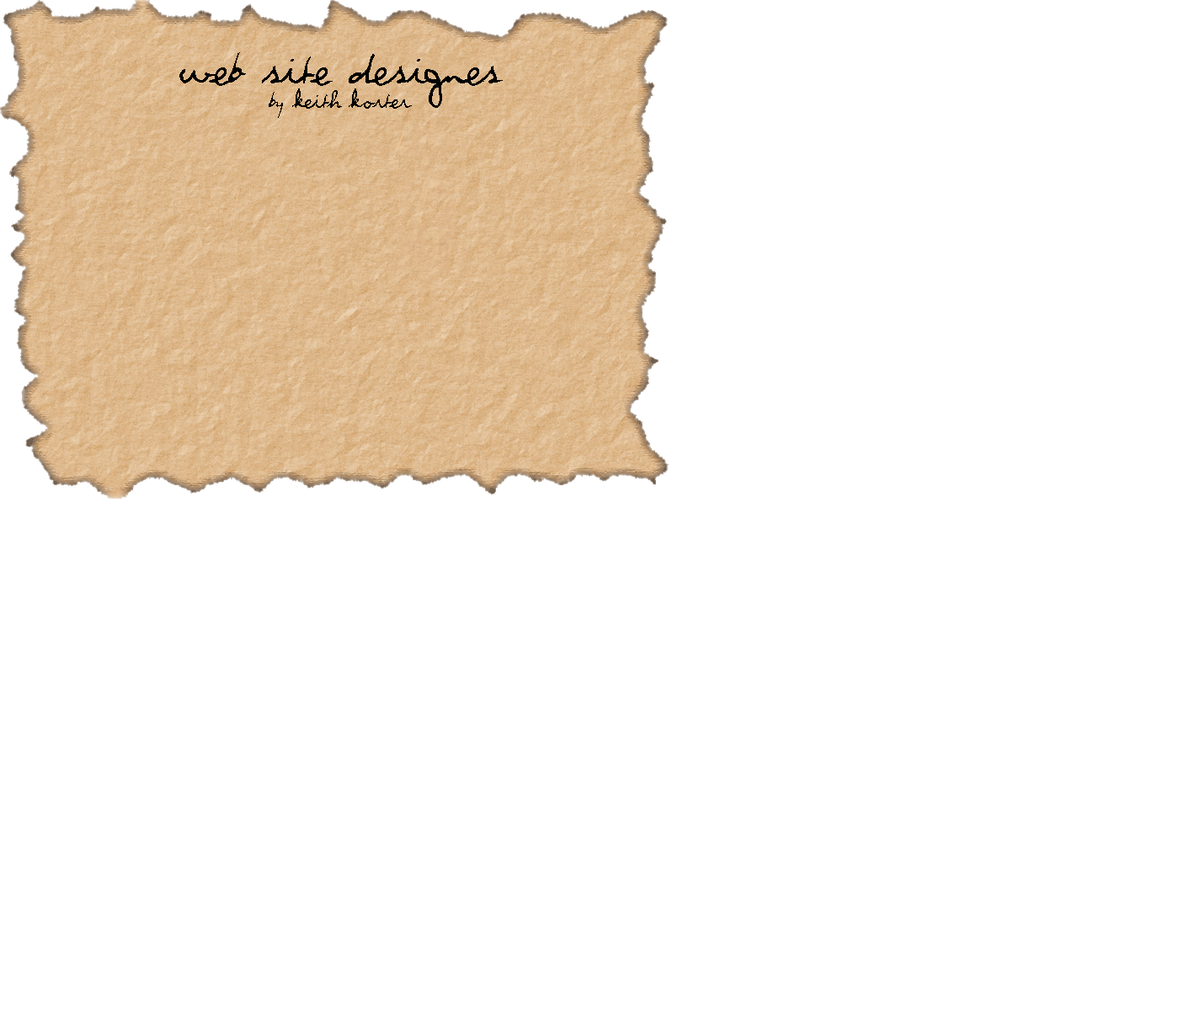
<style>
.page{position:relative;width:1179px;height:1011px;background:#ffffff}
.page>*{position:absolute;margin:0}
.t1{font:40.4px "Violation";color:#000000;scale:0.95 1}
.t2{font:20.2px "Violation";color:#000000;scale:0.95 1}
</style>
<div class="page">
<p class="t1" style="left:179px;top:52px;width:324px;height:66px;text-align:center">Web site designes <br><span class="t2">by keith korter</span></p>
</div>
